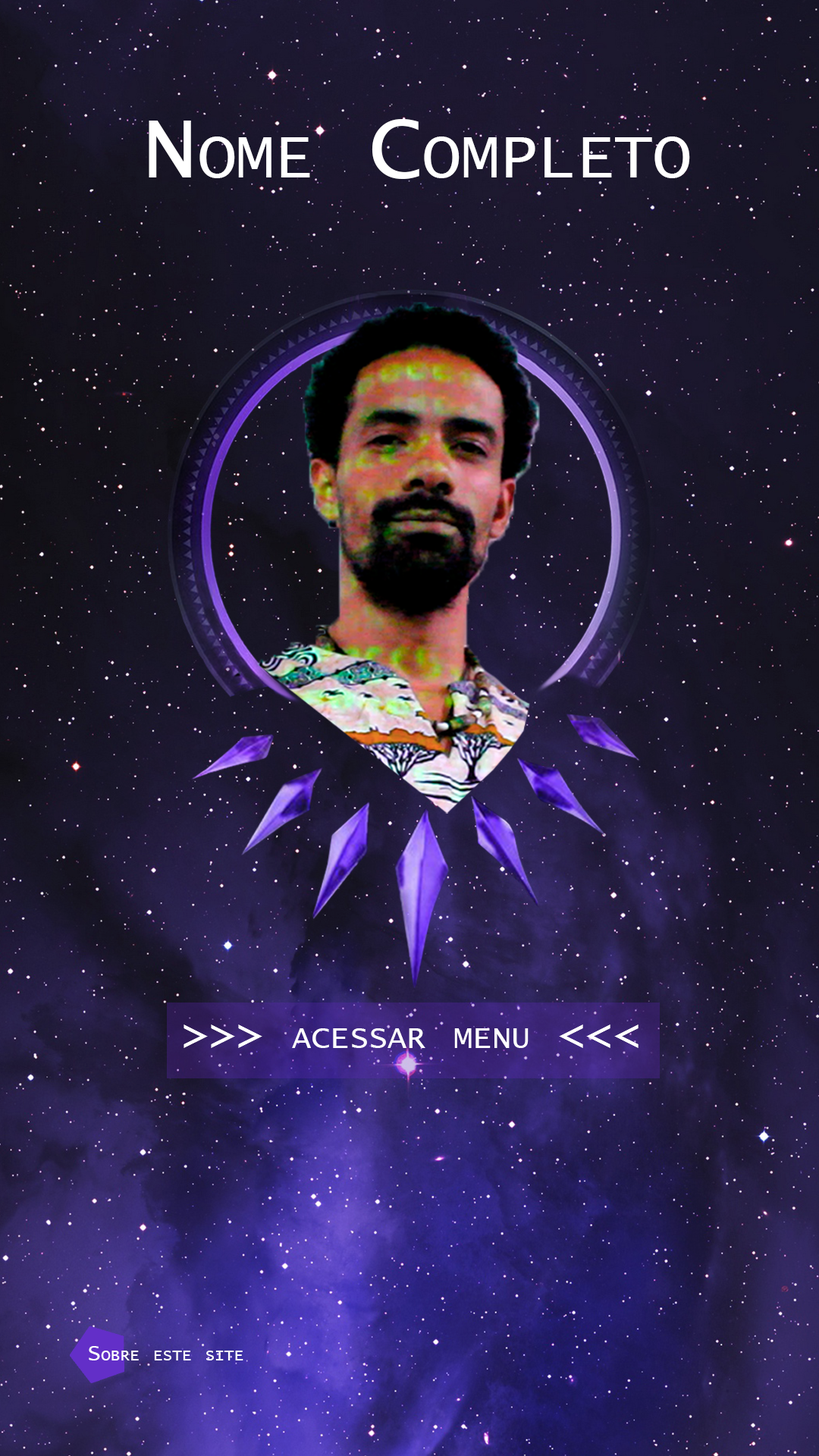
<style>
.page{position:relative;width:819px;height:1456px}
.page>*{position:absolute;margin:0}
.t1{font:91px "LucidaConsole";color:#ffffff;font-variant:small-caps}
.t2{font:45.5px "LucidaConsole";color:#ffffff;font-variant:small-caps}
.t3{font:22.7px "LucidaConsole";color:#ffffff;font-variant:small-caps}
</style>
<div class="page">
<p class="t1" style="left:149px;top:119px;width:541px;height:60px">Nome Completo</p>
<p class="t2" style="left:184px;top:1024px;width:455px;height:24px">&gt;&gt;&gt; acessar menu &lt;&lt;&lt;</p>
<p class="t3" style="left:89px;top:1346px;width:154px;height:14px">Sobre este site</p>
</div>
